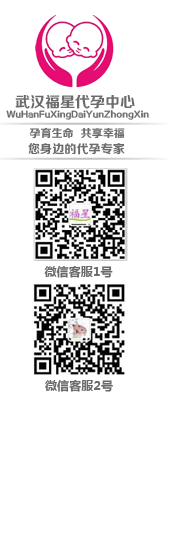
<style>
.page{position:relative;width:184px;height:542px;background:#ffffff}
.page>*{position:absolute;margin:0}
.t1{font:15px "FZZCHJW--GB1-0";color:#6b6b6b}
.t2{font:8px "FZZCHJW--GB1-0";color:#6b6b6b}
.t3{font:11px "FZZCHJW--GB1-0";color:#6b6b6b}
.t4{font:12px "FZZCHJW--GB1-0";letter-spacing:0.01em;color:#6b6b6b}
.t5{font:12px "MicrosoftYaHei-Bold";letter-spacing:0.01em;color:#6b6b6b}
</style>
<div class="page">
<p class="t1" style="left:15px;top:95px;width:120px;height:14px">武汉福星代孕中心</p>
<p class="t2" style="left:6px;top:110px;width:143px;height:10px">WuHanFuXingDaiYunZhongXin</p>
<p class="t3" style="left:29px;top:127px;width:96px;height:12px">孕育生命  共享幸福</p>
<p class="t4" style="left:28px;top:143px;width:97px;height:12px">您身边的代孕专家</p>
<p class="t5" style="left:44px;top:266px;width:69px;height:12px">微信客服1号</p>
<p class="t5" style="left:45px;top:379px;width:68px;height:13px">微信客服2号</p>
</div>
